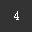
<style>
.page{position:relative;width:32px;height:32px;background:#333333}
.page>*{position:absolute;margin:0}
.t1{font:12px "CenturySchoolbook";letter-spacing:0.06em;color:#ffffff}
</style>
<div class="page">
<p class="t1" style="left:14px;top:11px;width:5px;height:9px">4</p>
</div>
